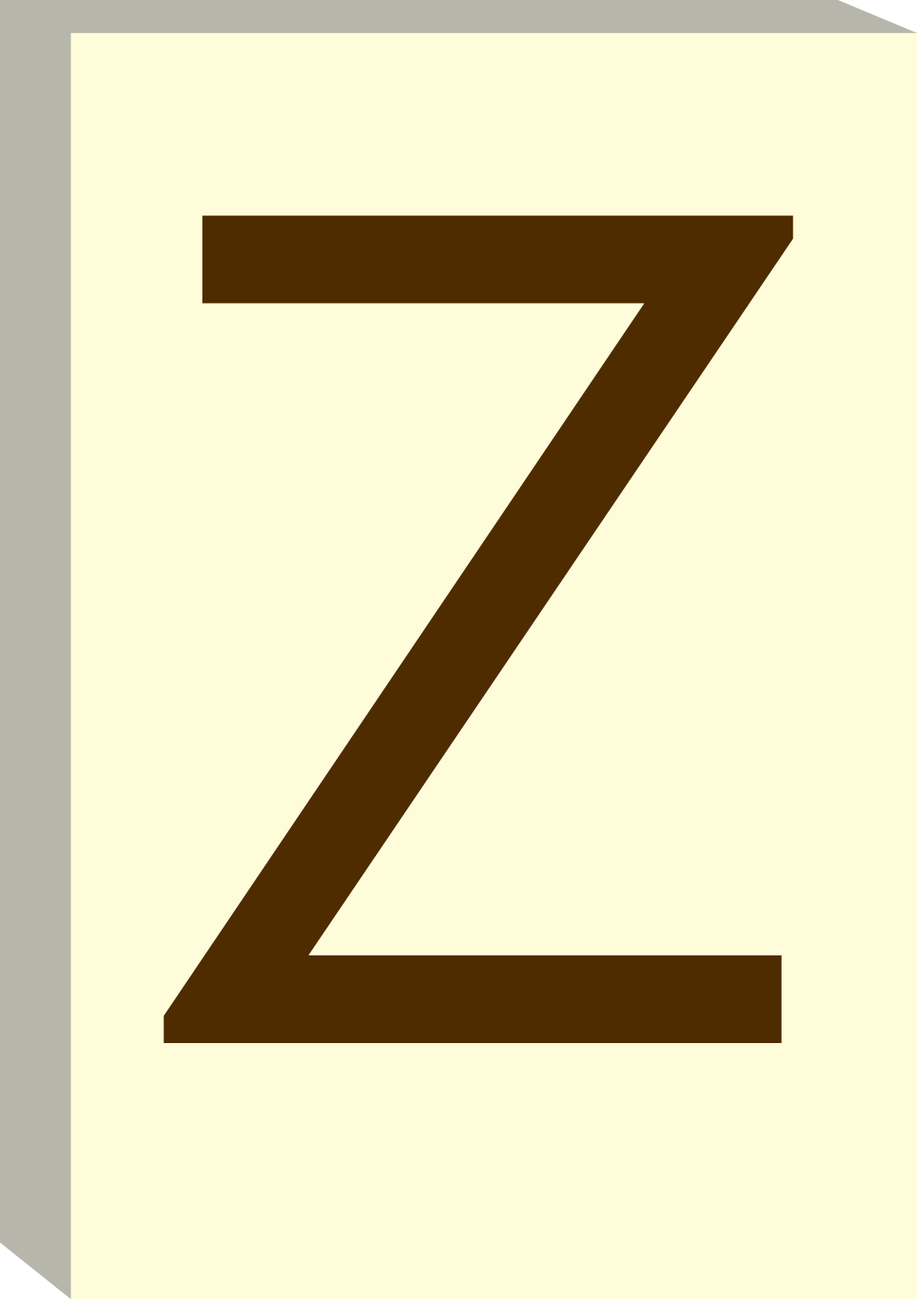
<style>
.page{position:relative;width:917px;height:1300px;background:#fffcd9}
.page>*{position:absolute;margin:0}
.t1{font:1181.7px "MicrosoftNewTaiLue";color:#4f2b00}
</style>
<div class="page">
<p class="t1" style="left:163px;top:215px;width:631px;height:828px">Z</p>
</div>
